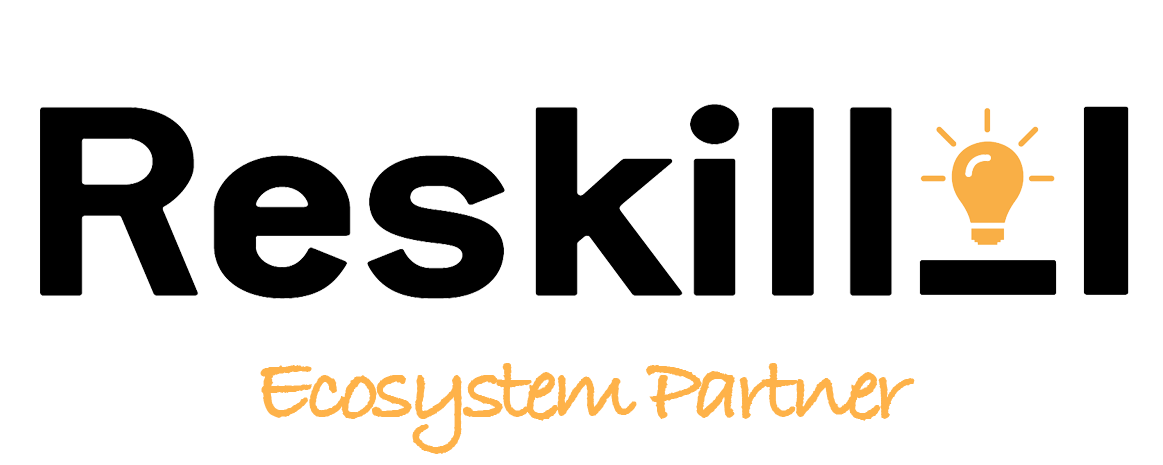
<style>
.page{position:relative;width:1163px;height:465px;background:#ffffff}
.page>*{position:absolute;margin:0}
.t1{font:95px "BradleyHandITCTT-Bold";letter-spacing:-0.08em;color:#feb249}
</style>
<div class="page">
<p class="t1" style="left:260px;top:363px;width:655px;height:91px">Ecosystem Partner</p>
</div>
